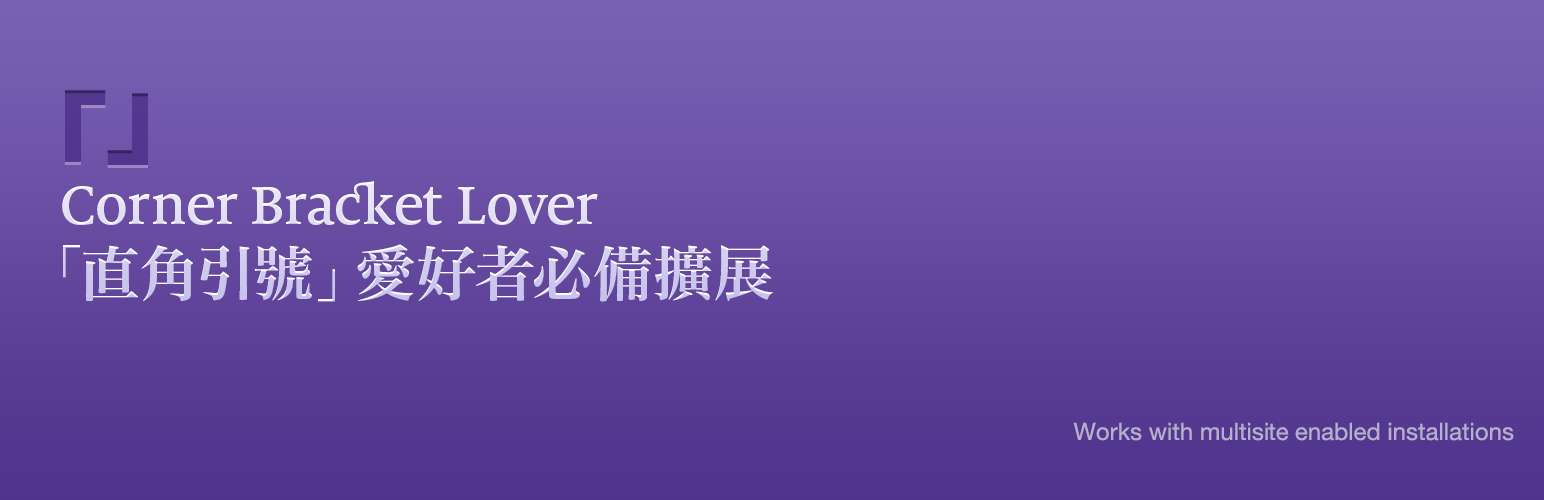
<style>
.page{position:relative;width:1544px;height:500px}
.page>*{position:absolute;margin:0}
.t1{font:135.4px "HiraginoSansGB-W6";color:#53368f}
.t2{font:60px "MiloSerifOT-Medi";color:#d6d2f0}
.t3{font:60px "HiraMinProN-W6";color:#d6d2f0}
.t4{font:24px "HelveticaNeue";color:#b7aecc}
</style>
<div class="page">
<p class="t1" style="left:64px;top:90px;width:84px;height:75px">「」</p>
<p class="t2" style="left:62px;top:181px;width:711px;height:121px">Corner Bracket Lover<br><span class="t3">「直角引號」愛好者必備擴展</span></p>
<p class="t4" style="left:1073px;top:422px;width:441px;height:19px">Works with multisite enabled installations</p>
</div>
